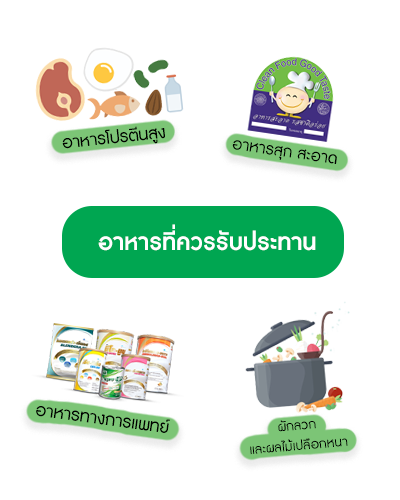
<style>
.page{position:relative;width:400px;height:500px;background:#ffffff}
.page>*{position:absolute;margin:0}
.t1{font:21.5px "DBAdmanX";color:#000000}
.t2{font:20.6px "DBAdmanX";color:#000000}
.t3{font:30px "DBAdmanX-Bold";color:#ffffff}
.t4{font:21.9px "DBAdmanX";color:#000000}
.t5{font:16.9px "DBAdmanX";color:#000000}
</style>
<div class="page">
<p class="t1" style="left:62px;top:126px;width:103px;height:23px;rotate:-6deg">อาหารโปรตีนสูง</p>
<p class="t2" style="left:232px;top:140px;width:105px;height:24px;rotate:8deg">อาหารสุก สะอาด</p>
<p class="t3" style="left:98px;top:224px;width:218px;height:27px">อาหารที่ควรรับประทาน</p>
<p class="t4" style="left:36px;top:406px;width:134px;height:27px;rotate:8deg">อาหารทางการแพทย์</p>
<p class="t5" style="left:250px;top:420px;width:98px;height:35px;text-align:center;rotate:-5deg">ผักลวก<br>และผลไม้เปลือกหนา</p>
</div>
